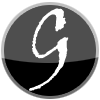
<style>
.page{position:relative;width:100px;height:100px;background:#4e4e4e}
.page>*{position:absolute;margin:0}
.t1{font:73px "VinerHandITC";color:#ffffff}
</style>
<div class="page">
<p class="t1" style="left:29px;top:8px;width:40px;height:83px">G</p>
</div>
